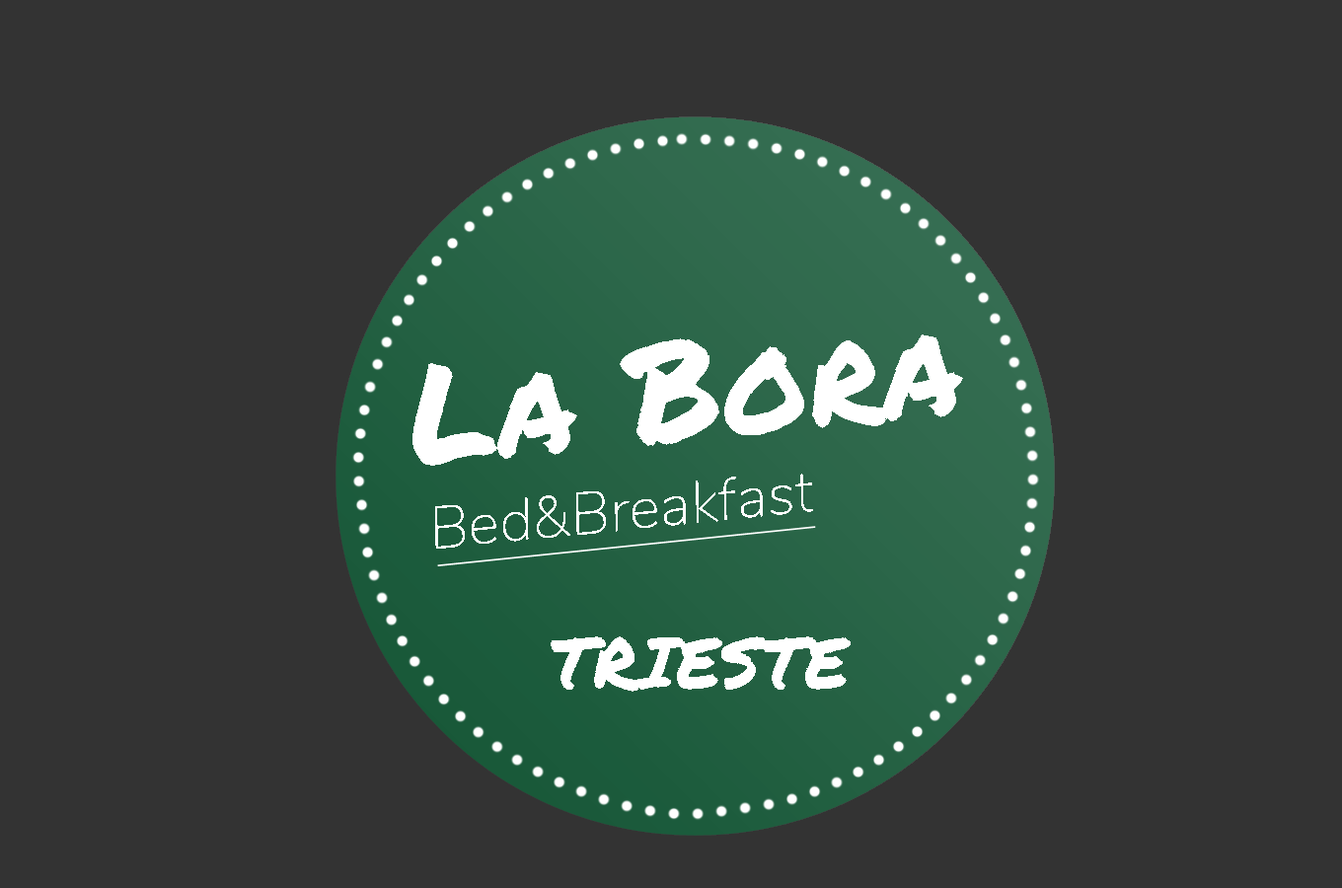
<style>
.page{position:relative;width:1342px;height:888px;background:#333333}
.page>*{position:absolute;margin:0}
.t1{font:138.2px "PermanentMarker";color:#ffffff}
.t2{font:59.2px "Nunito-ExtraLightItalic";color:#ffffff}
.t3{font:71.1px "PermanentMarker";color:#ffffff}
</style>
<div class="page">
<p class="t1" style="left:413px;top:335px;width:550px;height:131px;rotate:-5deg">La Bora</p>
<p class="t2" style="left:435px;top:474px;width:378px;height:75px;rotate:-6deg">Bed&amp;Breakfast</p>
<p class="t3" style="left:551px;top:637px;width:300px;height:55px">TRIESTE</p>
</div>
